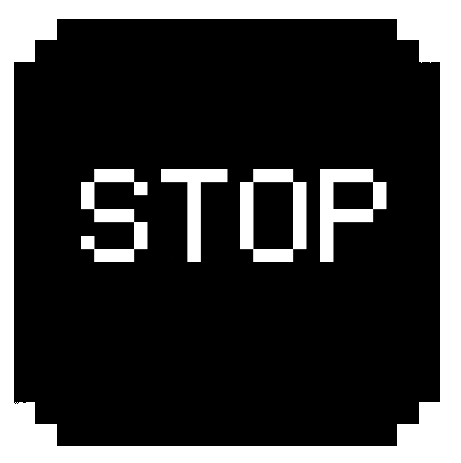
<style>
.page{position:relative;width:461px;height:463px;background:#000000}
.page>*{position:absolute;margin:0}
.t1{font:169.6px "C&CRedAlert[INET]";color:#ffffff}
</style>
<div class="page">
<p class="t1" style="left:81px;top:169px;width:306px;height:93px">STOP</p>
</div>
